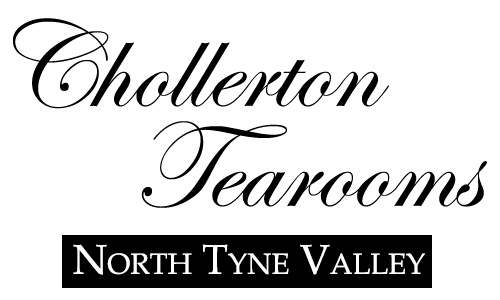
<style>
.page{position:relative;width:500px;height:300px;background:#ffffff}
.page>*{position:absolute;margin:0}
.t1{font:125px/100px "EdwardianScriptITC";color:#000000}
.t2{font:41.7px "BookAntiqua";color:#ffffff;font-variant:small-caps}
</style>
<div class="page">
<p class="t1" style="left:13px;top:18px;width:474px;height:190px;text-align:center">Chollerton<br>           Tearooms</p>
<p class="t2" style="left:73px;top:244px;width:352px;height:31px">North Tyne Valley</p>
</div>
